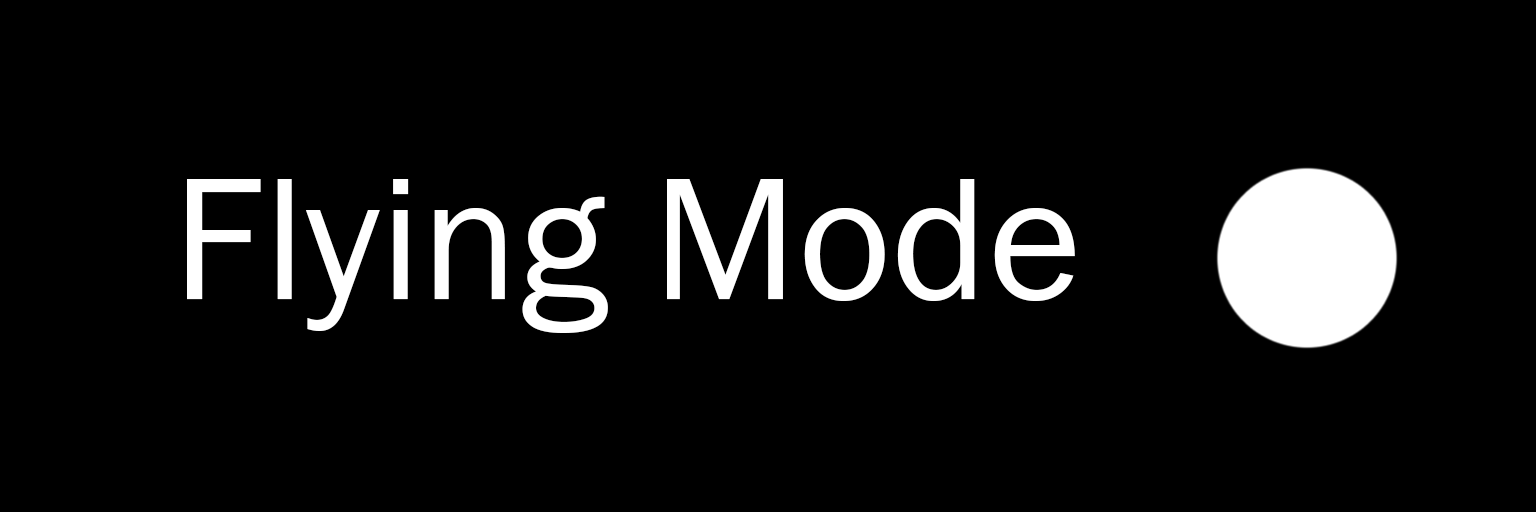
<style>
.page{position:relative;width:1536px;height:512px;background:#000000}
.page>*{position:absolute;margin:0}
.t1{font:180px "FranklinGothic-Book";color:#ffffff}
</style>
<div class="page">
<p class="t1" style="left:187px;top:179px;width:888px;height:154px">Flying Mode</p>
</div>
